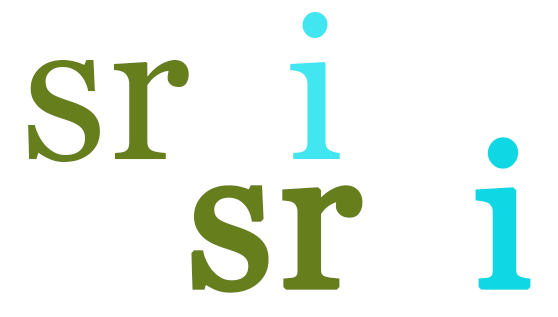
<style>
.page{position:relative;width:558px;height:317px;background:#ffffff}
.page>*{position:absolute;margin:0}
.t1{font:200px "Georgia";color:#677e1c}
.t2{font:200px "Georgia";color:#41e6f0}
.t3{font:200px "Georgia";color:#677e1c;font-weight:bold}
.t4{font:200px "Georgia";color:#0fd7e3;font-weight:bold}
</style>
<div class="page">
<p class="t1" style="left:28px;top:11px;width:312px;height:151px">sr  <span class="t2">i</span></p>
<p class="t3" style="left:191px;top:137px;width:340px;height:156px">sr  <span class="t4">i</span></p>
</div>
